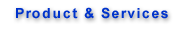
<style>
.page{position:relative;width:190px;height:30px;background:#ffffff}
.page>*{position:absolute;margin:0}
.t1{font:14px "Arial-BoldMT";letter-spacing:0.1em;color:#0033cc}
</style>
<div class="page">
<p class="t1" style="left:16px;top:7px;width:152px;height:12px">Product &amp; Services</p>
</div>
